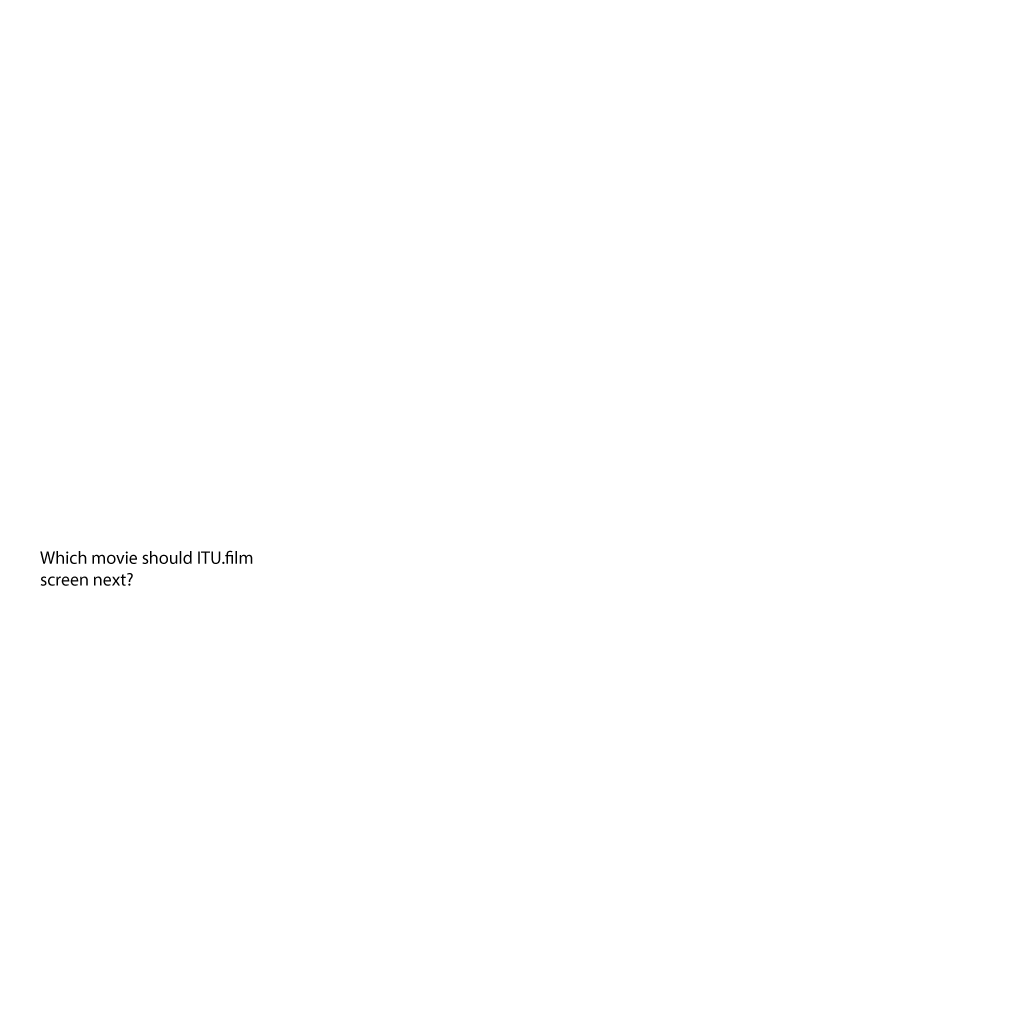
<style>
.page{position:relative;width:1020px;height:1020px;background:#ffffff}
.page>*{position:absolute;margin:0}
.t1{font:18px "MyriadPro-Regular";color:#000000}
</style>
<div class="page">
<p class="t1" style="left:40px;top:550px;width:213px;height:36px">Which movie should ITU.film screen next?</p>
</div>
